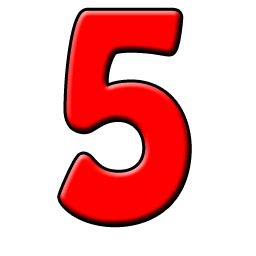
<style>
.page{position:relative;width:256px;height:256px;background:#ffffff}
.page>*{position:absolute;margin:0}
.t1{font:250px "HoboStd";color:#ff0000;font-weight:bold}
</style>
<div class="page">
<p class="t1" style="left:60px;top:10px;width:129px;height:215px">5</p>
</div>
